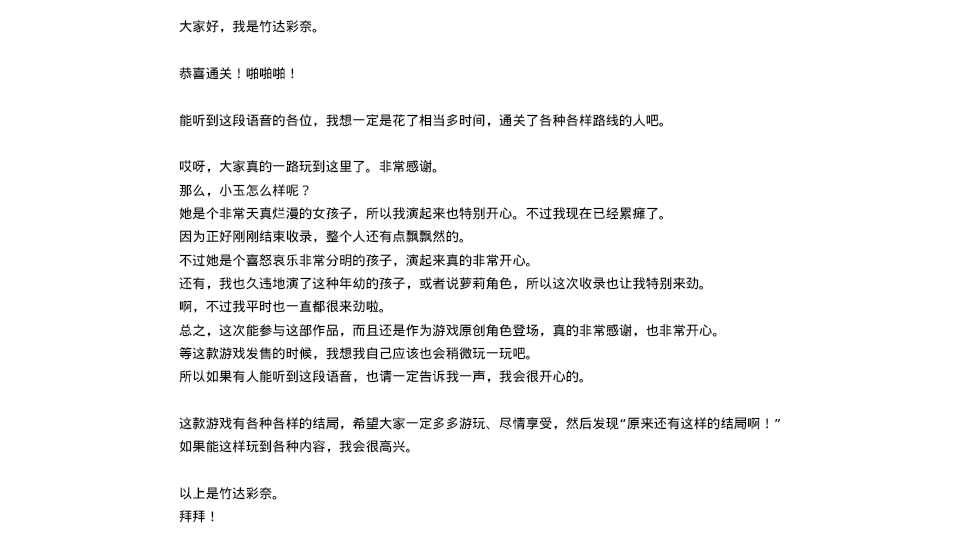
<style>
.page{position:relative;width:960px;height:544px;background:#ffffff}
.page>*{position:absolute;margin:0}
.t1{font:13.3px "WenQuanYiMicroHeiMono";color:#000000}
</style>
<div class="page">
<p class="t1" style="left:179px;top:20px;width:602px;height:503px">大家好，我是竹达彩奈。<br><br>恭喜通关！啪啪啪！<br><br>能听到这段语音的各位，我想一定是花了相当多时间，通关了各种各样路线的人吧。<br><br>哎呀，大家真的一路玩到这里了。非常感谢。<br>那么，小玉怎么样呢？<br>她是个非常天真烂漫的女孩子，所以我演起来也特别开心。不过我现在已经累瘫了。<br>因为正好刚刚结束收录，整个人还有点飘飘然的。<br>不过她是个喜怒哀乐非常分明的孩子，演起来真的非常开心。<br>还有，我也久违地演了这种年幼的孩子，或者说萝莉角色，所以这次收录也让我特别来劲。<br>啊，不过我平时也一直都很来劲啦。<br>总之，这次能参与这部作品，而且还是作为游戏原创角色登场，真的非常感谢，也非常开心。<br>等这款游戏发售的时候，我想我自己应该也会稍微玩一玩吧。<br>所以如果有人能听到这段语音，也请一定告诉我一声，我会很开心的。<br><br>这款游戏有各种各样的结局，希望大家一定多多游玩、尽情享受，然后发现“原来还有这样的结局啊！”<br>如果能这样玩到各种内容，我会很高兴。<br><br>以上是竹达彩奈。<br>拜拜！</p>
</div>
